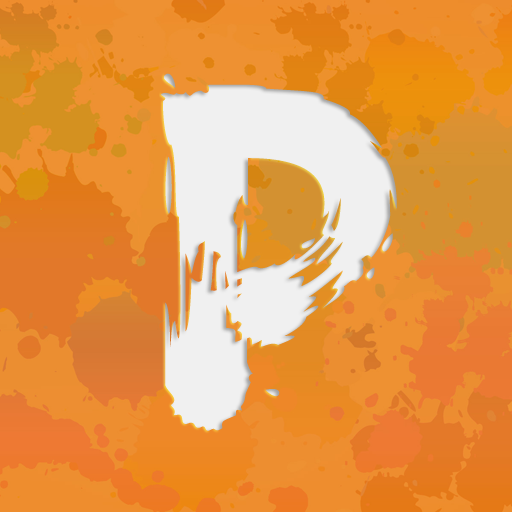
<style>
.page{position:relative;width:512px;height:512px}
.page>*{position:absolute;margin:0}
.t1{font:400px "BrushStrokeFast";color:#ffffff}
</style>
<div class="page">
<p class="t1" style="left:161px;top:73px;width:236px;height:358px">P</p>
</div>
